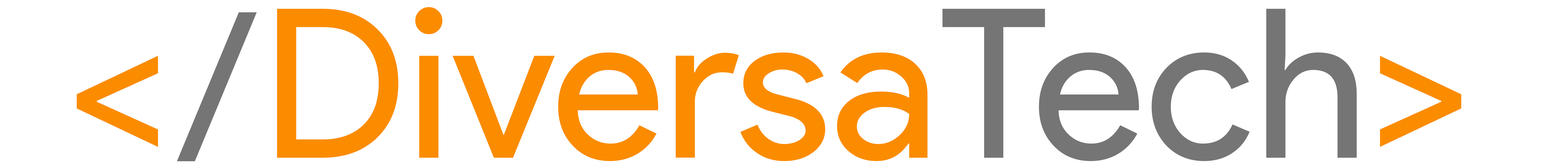
<style>
.page{position:relative;width:1568px;height:163px;background:#ffffff}
.page>*{position:absolute;margin:0}
.t1{font:208.2px "ProductSans-Regular";color:#fb8c00}
.t2{font:208.2px "ProductSans-Regular";color:#757575}
</style>
<div class="page">
<p class="t1" style="left:77px;top:7px;width:1384px;height:155px">&lt;  Diversa<span class="t2">Tech</span>&gt;</p>
<p class="t2" style="left:177px;top:12px;width:80px;height:150px">/</p>
</div>
